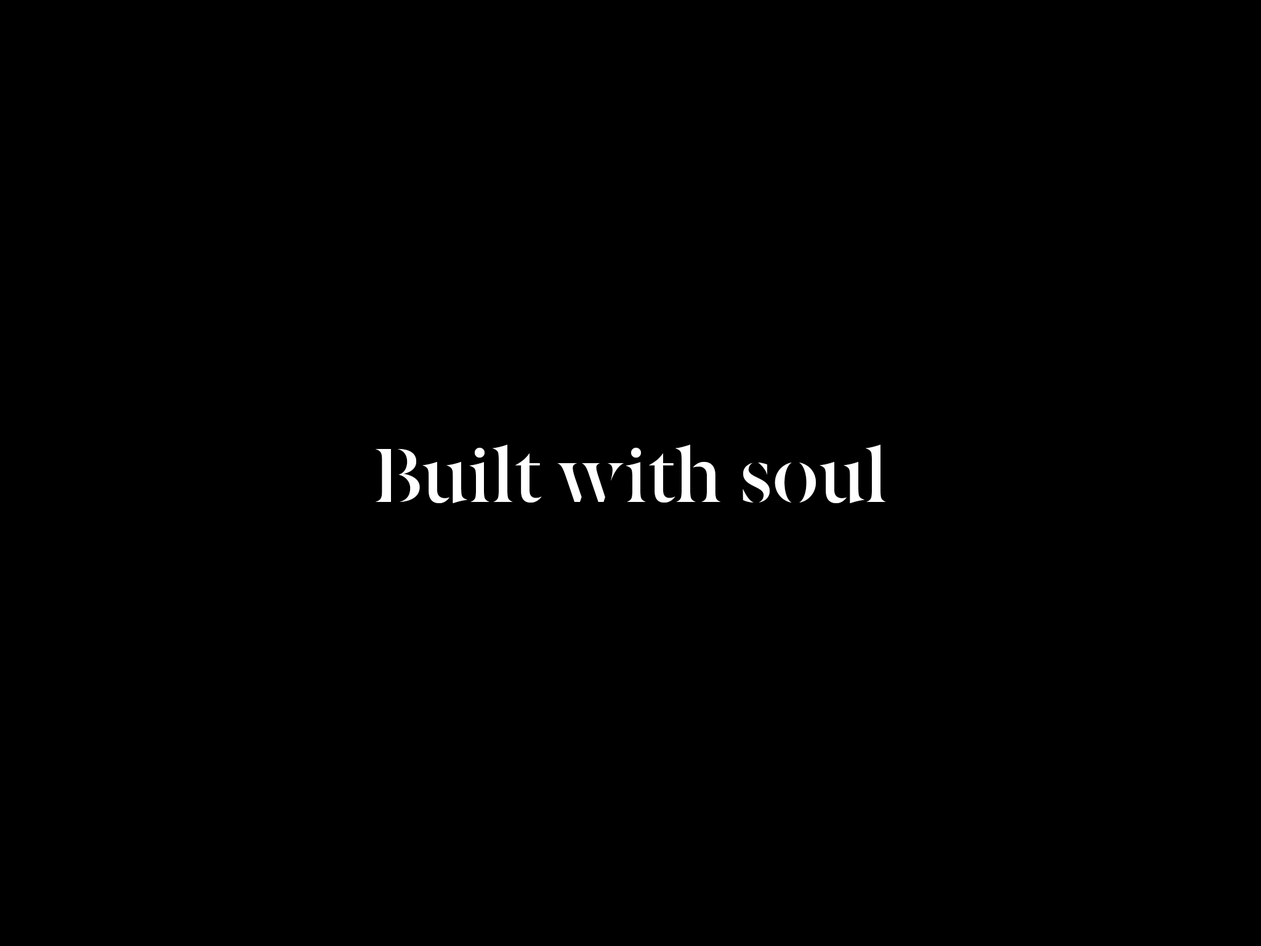
<style>
.page{position:relative;width:1261px;height:946px;background:#000000}
.page>*{position:absolute;margin:0}
.t1{font:76.3px "BerlingskeSerifSt-DBd";color:#ffffff}
</style>
<div class="page">
<p class="t1" style="left:375px;top:445px;width:511px;height:58px">Built with soul</p>
</div>
